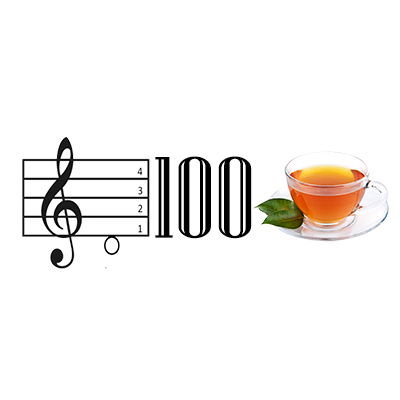
<style>
.page{position:relative;width:400px;height:400px;background:#ffffff}
.page>*{position:absolute;margin:0}
.t1{font:114.7px "NiagaraEngraved-Reg";color:#000000;scale:1.17 1}
</style>
<div class="page">
<p class="t1" style="left:155px;top:156px;width:97px;height:83px">100</p>
</div>
